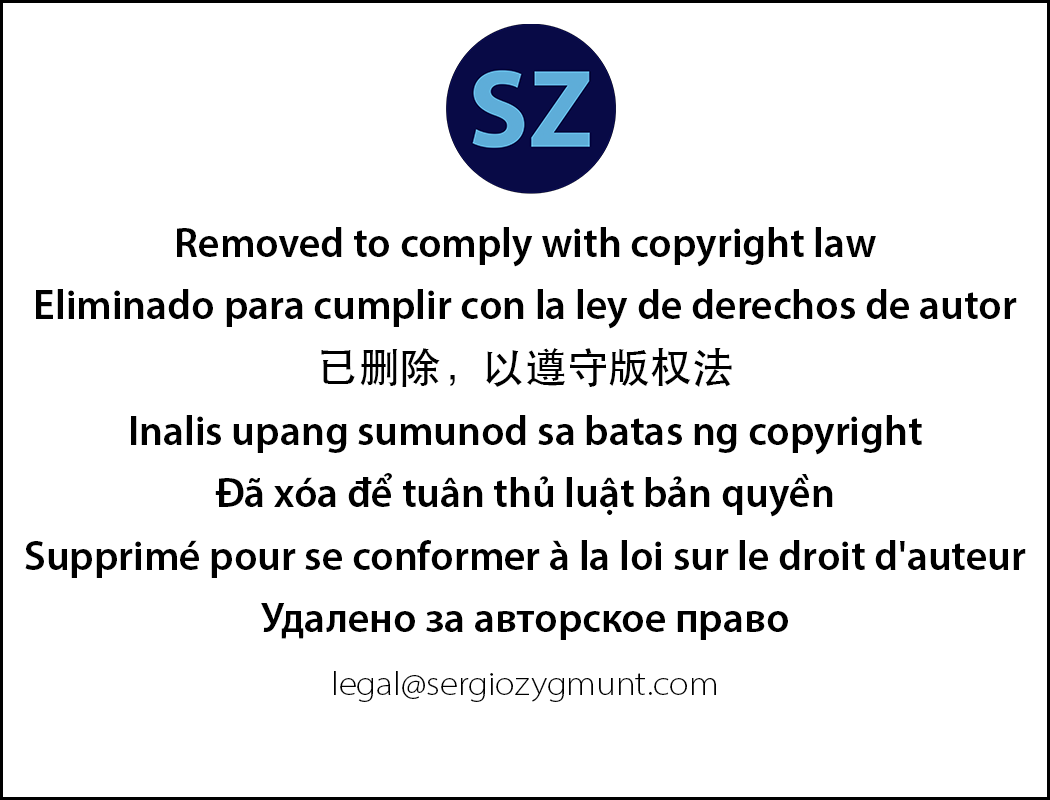
<style>
.page{position:relative;width:1050px;height:800px;background:#ffffff}
.page>*{position:absolute;margin:0}
.t1{font:41.7px/62.5px "MyriadPro-Semibold";color:#000000}
.t2{font:41.7px/62.5px "STHeitiSC-Medium";color:#000000}
.t3{font:33.3px/62.5px "MyriadPro-LightSemiExt";color:#000000}
</style>
<div class="page">
<p class="t1" style="left:25px;top:227px;width:1001px;height:475px;text-align:center">Removed to comply with copyright law<br>Eliminado para cumplir con la ley de derechos de autor<br><span class="t2">已删除，以遵守版权法<br></span>Inalis upang sumunod sa batas ng copyright<br>Đã xóa để tuân thủ luật bản quyền<br>Supprimé pour se conformer à la loi sur le droit d'auteur<br>Удалено за авторское право<br><span class="t3">legal@sergiozygmunt.com</span></p>
</div>
